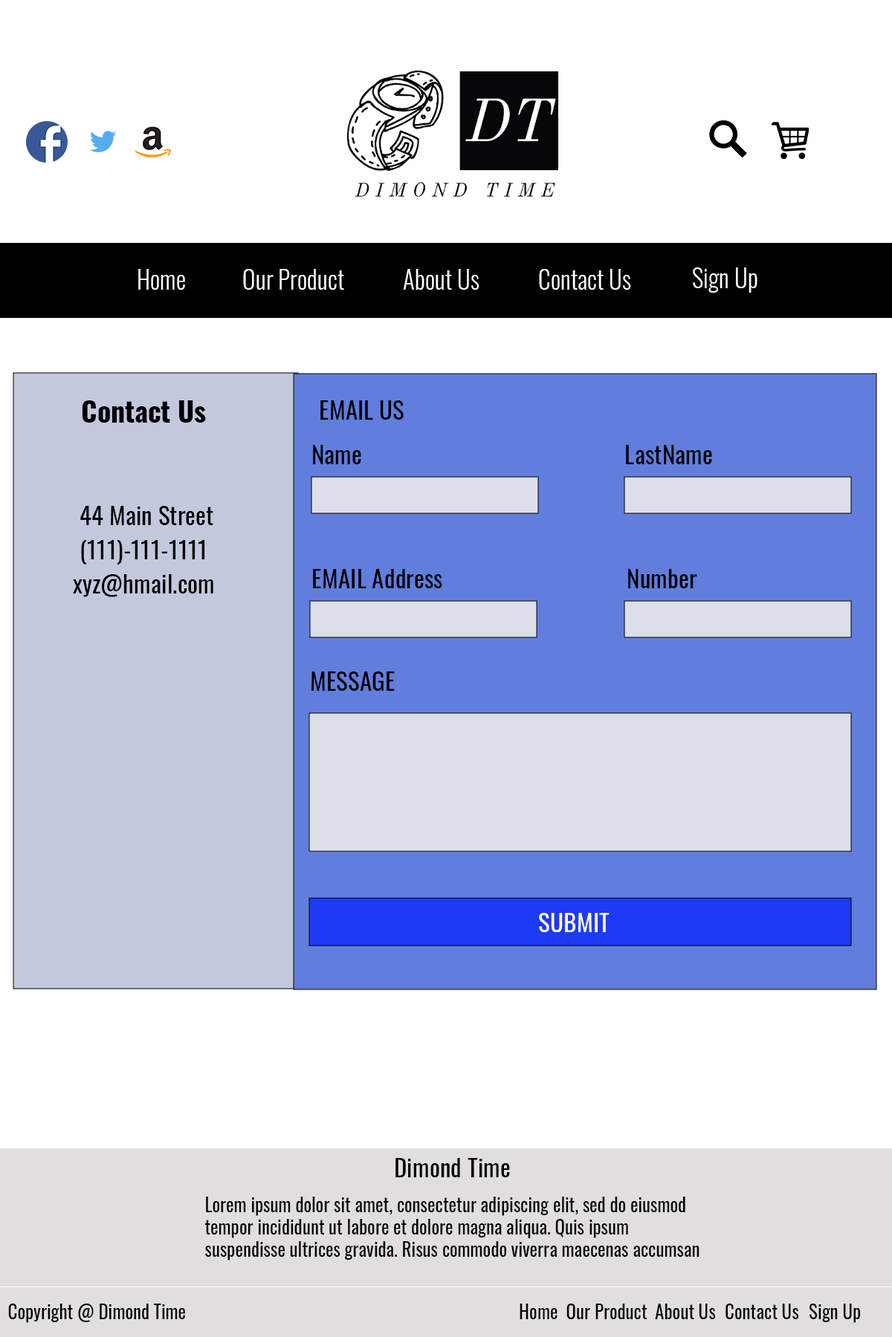
<style>
.page{position:relative;width:892px;height:1337px;background:#ffffff}
.page>*{position:absolute;margin:0}
.t1{font:24.8px "Oswald-Light";color:#ffffff}
.t2{font:24.8px/34.1px "Oswald-Regular";color:#000000}
.t3{font:27.9px/34.1px "Oswald-Bold";color:#000000}
.t4{font:24.8px "Oswald-Regular";color:#000000}
.t5{font:24.8px "Oswald-Regular";color:#ffffff}
.t6{font:24.8px "Oswald-Regular";color:#040404}
.t7{font:18.6px "Oswald-Regular";color:#040404}
</style>
<div class="page">
<p class="t1" style="left:138px;top:269px;width:47px;height:21px">Home</p>
<p class="t1" style="left:243px;top:269px;width:101px;height:21px">Our Product</p>
<p class="t1" style="left:403px;top:269px;width:76px;height:21px">About Us</p>
<p class="t1" style="left:539px;top:269px;width:92px;height:21px">Contact Us</p>
<p class="t1" style="left:692px;top:267px;width:65px;height:26px">Sign Up</p>
<p class="t2" style="left:73px;top:400px;width:140px;height:197px;text-align:center"><span class="t3">Contact Us<br></span><br><br> 44 Main Street<br>(111)-111-1111<br>xyz@hmail.com</p>
<p class="t4" style="left:320px;top:400px;width:83px;height:20px">EMAIL US</p>
<p class="t4" style="left:313px;top:445px;width:48px;height:19px">Name</p>
<p class="t4" style="left:626px;top:445px;width:86px;height:19px">LastName</p>
<p class="t4" style="left:313px;top:569px;width:129px;height:19px">EMAIL Address</p>
<p class="t4" style="left:628px;top:569px;width:69px;height:19px">Number</p>
<p class="t4" style="left:311px;top:672px;width:84px;height:19px">MESSAGE</p>
<p class="t5" style="left:539px;top:913px;width:70px;height:19px">SUBMIT</p>
<p class="t6" style="left:395px;top:1158px;width:115px;height:20px">Dimond Time</p>
<p class="t7" style="left:205px;top:1197px;width:494px;height:64px">Lorem ipsum dolor sit amet, consectetur adipiscing elit, sed do eiusmod tempor incididunt ut labore et dolore magna aliqua. Quis ipsum suspendisse ultrices gravida. Risus commodo viverra maecenas accumsan lacus vel facilisis.</p>
<p class="t7" style="left:8px;top:1304px;width:177px;height:19px">Copyright @ Dimond Time</p>
<p class="t7" style="left:519px;top:1304px;width:38px;height:16px">Home</p>
<p class="t7" style="left:566px;top:1304px;width:81px;height:16px">Our Product</p>
<p class="t7" style="left:655px;top:1304px;width:61px;height:16px">About Us</p>
<p class="t7" style="left:725px;top:1304px;width:74px;height:16px">Contact Us</p>
<p class="t7" style="left:809px;top:1304px;width:51px;height:19px">Sign Up</p>
</div>
